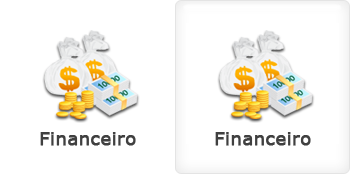
<style>
.page{position:relative;width:350px;height:175px;background:#ffffff}
.page>*{position:absolute;margin:0}
.t1{font:18px "Verdana";color:#404040;font-weight:bold}
</style>
<div class="page">
<p class="t1" style="left:40px;top:132px;width:96px;height:14px">Financeiro</p>
<p class="t1" style="left:215px;top:132px;width:96px;height:14px">Financeiro</p>
</div>
